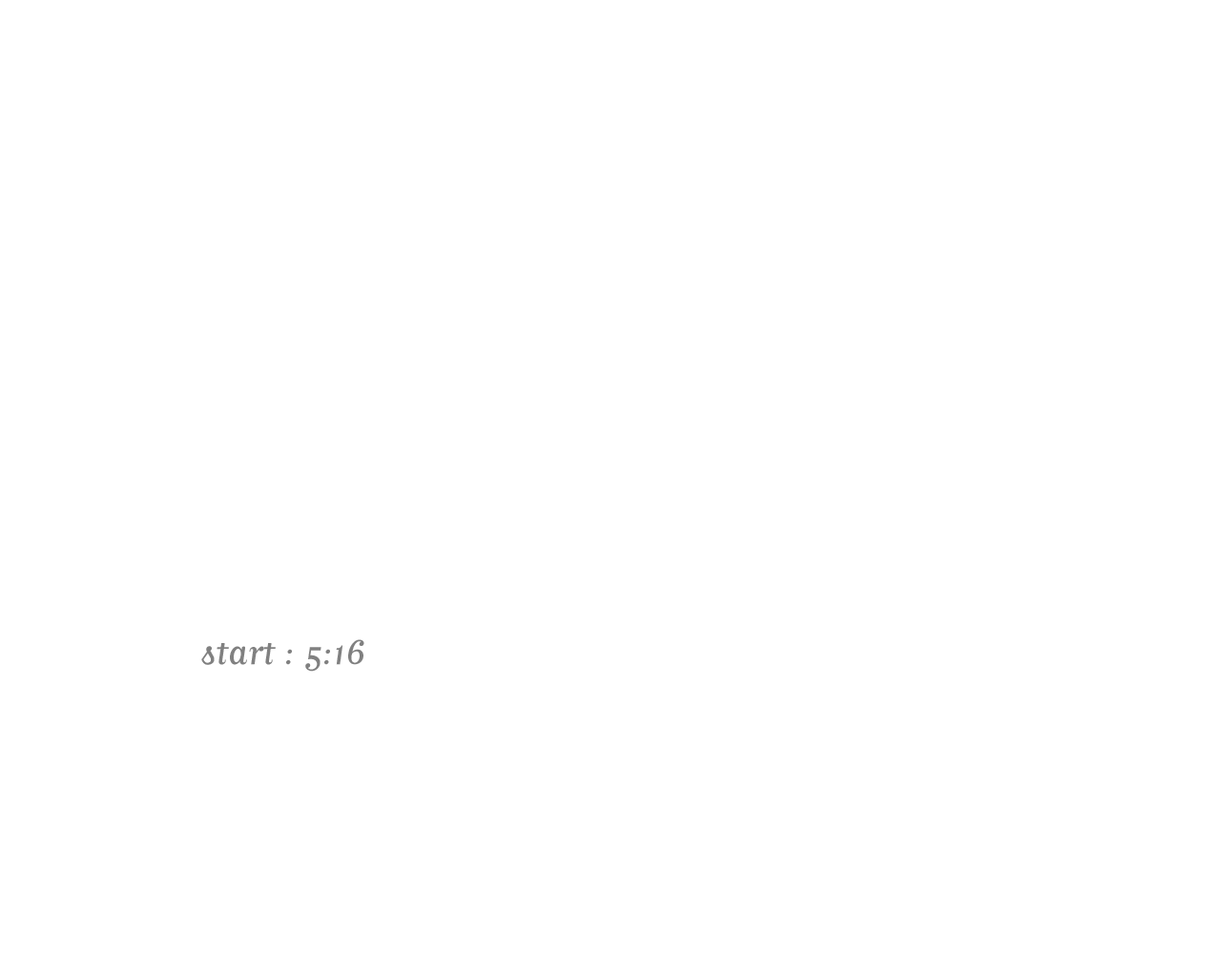
<style>
.page{position:relative;width:1221px;height:977px;background:#ffffff}
.page>*{position:absolute;margin:0}
.t1{font:48.5px "MatrixScriptRegular";color:#808080}
</style>
<div class="page">
<p class="t1" style="left:201px;top:639px;width:163px;height:32px">start : 5:16</p>
</div>
